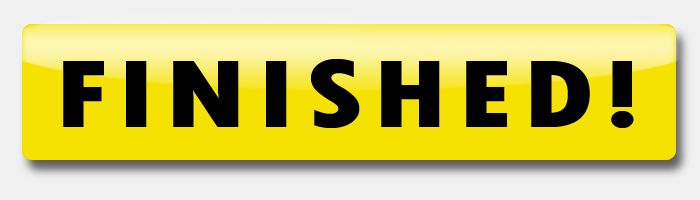
<style>
.page{position:relative;width:700px;height:200px;background:#f5e102}
.page>*{position:absolute;margin:0}
.t1{font:101.8px "TwCenMT-CondensedExtraBold";letter-spacing:0.06em;color:#000000;scale:1.33 1}
</style>
<div class="page">
<p class="t1" style="left:63px;top:59px;width:571px;height:69px">FINISHED!</p>
</div>
